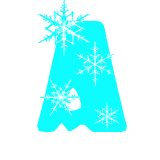
<style>
.page{position:relative;width:160px;height:160px;background:#ffffff}
.page>*{position:absolute;margin:0}
.t1{font:180px "winterflakes";color:#0ffcff}
</style>
<div class="page">
<p class="t1" style="left:37px;top:0px;width:90px;height:132px">A</p>
</div>
